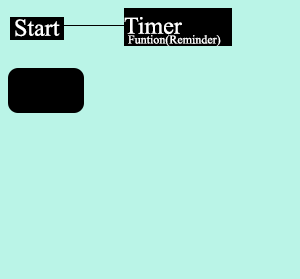
<style>
.page{position:relative;width:300px;height:279px;background:#baf4e7}
.page>*{position:absolute;margin:0}
.t1{font:24px "TimesNewRomanPSMT";color:#ffffff}
.t2{font:12px "TimesNewRomanPSMT";color:#ffffff}
</style>
<div class="page">
<p class="t1" style="left:124px;top:17px;width:58px;height:18px">Timer</p>
<p class="t1" style="left:15px;top:19px;width:45px;height:18px">Start</p>
<p class="t2" style="left:128px;top:35px;width:93px;height:12px">Funtion(Reminder)</p>
</div>
